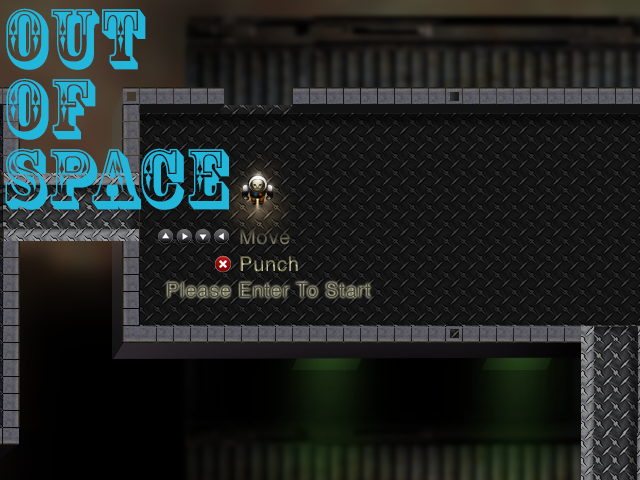
<style>
.page{position:relative;width:640px;height:480px}
.page>*{position:absolute;margin:0}
.t1{font:80px/70px "RosewoodStd-Regular";letter-spacing:0.04em;color:#22b6db}
.t2{font:20px "Helvetica";letter-spacing:0.04em}
</style>
<div class="page">
<p class="t1" style="left:5px;top:8px;width:224px;height:202px">out <br>of <br>Space</p>
<p class="t2" style="left:240px;top:229px;width:50px;height:16px">Move</p>
<p class="t2" style="left:240px;top:256px;width:58px;height:16px">Punch</p>
</div>
